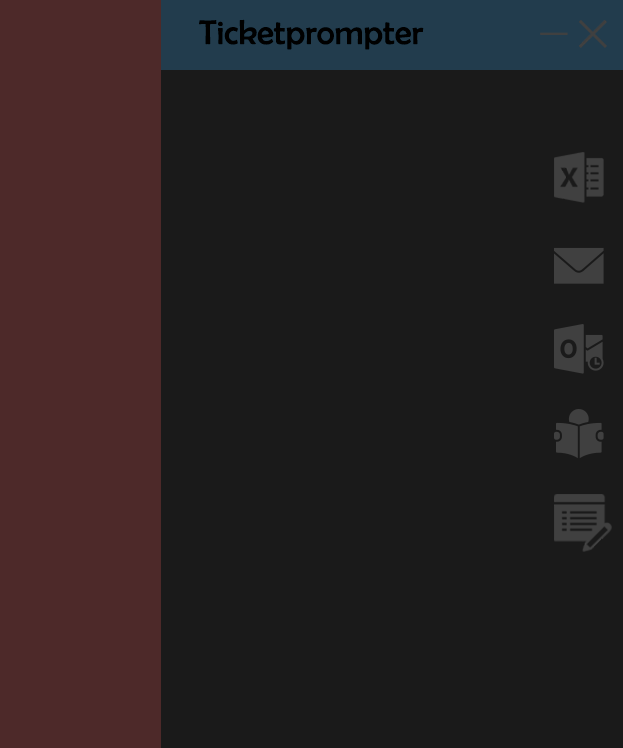
<style>
.page{position:relative;width:623px;height:748px;background:#1a1a1a}
.page>*{position:absolute;margin:0}
.t1{font:34.7px "BerlinSansFB-Reg";color:#000000}
</style>
<div class="page">
<p class="t1" style="left:199px;top:19px;width:225px;height:31px">Ticketprompter</p>
</div>
